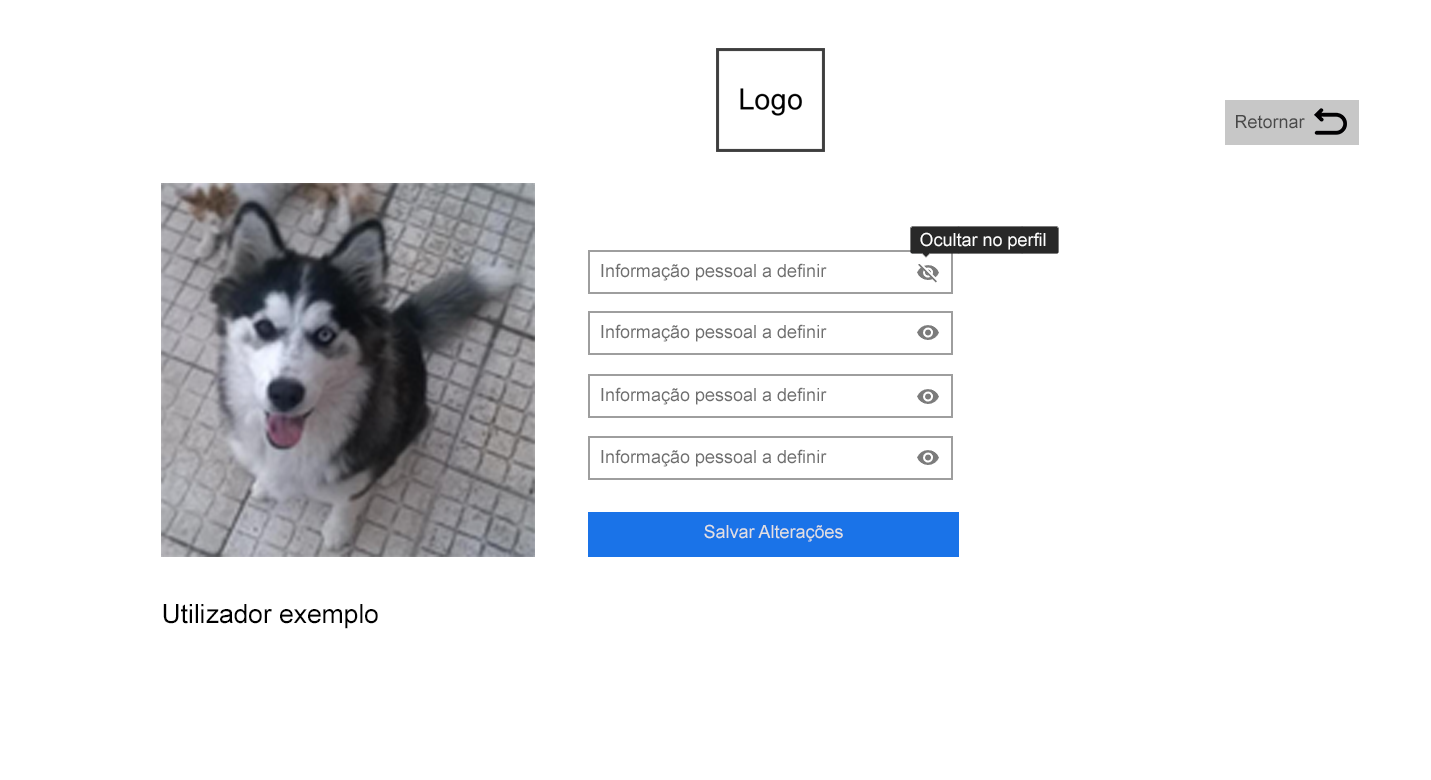
<style>
.page{position:relative;width:1431px;height:780px;background:#ffffff}
.page>*{position:absolute;margin:0}
.t1{font:18px "ArialMT";color:#484848}
.t2{font:18px "ArialMT";color:#ffffff}
.t3{font:18px "ArialMT";color:#6e6e6e}
.t4{font:18px "ArialMT";color:#e1e1e1}
.t5{font:26.4px "ArialMT";color:#000000}
</style>
<div class="page">
<p class="t1" style="left:1236px;top:115px;width:69px;height:14px">Retornar</p>
<p class="t2" style="left:920px;top:232px;width:126px;height:18px">Ocultar no perfil</p>
<p class="t3" style="left:601px;top:263px;width:226px;height:18px">Informação pessoal a definir</p>
<p class="t3" style="left:601px;top:324px;width:226px;height:18px">Informação pessoal a definir</p>
<p class="t3" style="left:601px;top:387px;width:226px;height:18px">Informação pessoal a definir</p>
<p class="t3" style="left:601px;top:449px;width:226px;height:18px">Informação pessoal a definir</p>
<p class="t4" style="left:704px;top:524px;width:139px;height:18px">Salvar Alterações</p>
<p class="t5" style="left:163px;top:604px;width:215px;height:25px">Utilizador exemplo</p>
</div>
